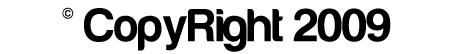
<style>
.page{position:relative;width:454px;height:54px;background:#ffffff}
.page>*{position:absolute;margin:0}
.t1{font:48px "Harabara-Bold";color:#000000}
</style>
<div class="page">
<p class="t1" style="left:62px;top:7px;width:329px;height:45px">© CopyRight 2009</p>
</div>
